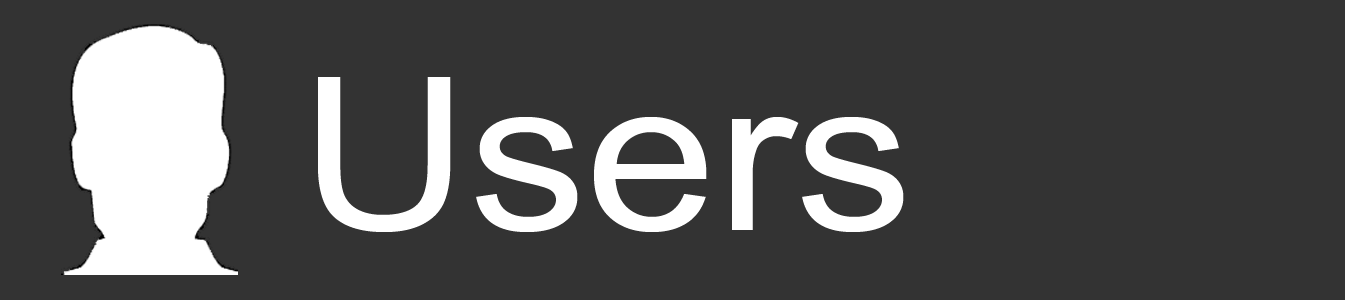
<style>
.page{position:relative;width:1345px;height:300px;background:#333333}
.page>*{position:absolute;margin:0}
.t1{font:214.4px "ArialNarrow";color:#ffffff;scale:1.33 1}
</style>
<div class="page">
<p class="t1" style="left:318px;top:77px;width:586px;height:155px">Users</p>
</div>
